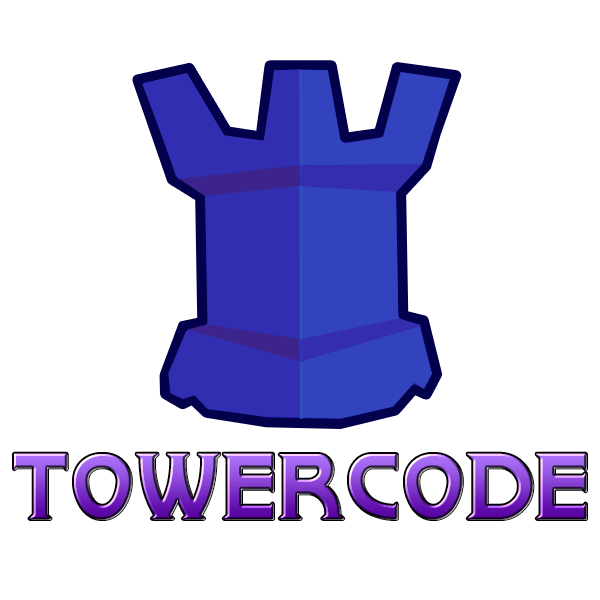
<style>
.page{position:relative;width:600px;height:600px;background:#ffffff}
.page>*{position:absolute;margin:0}
.t1{font:80px "BrownwoodNF";letter-spacing:0.02em}
</style>
<div class="page">
<p class="t1" style="left:14px;top:453px;width:572px;height:66px">TowerCode</p>
</div>
